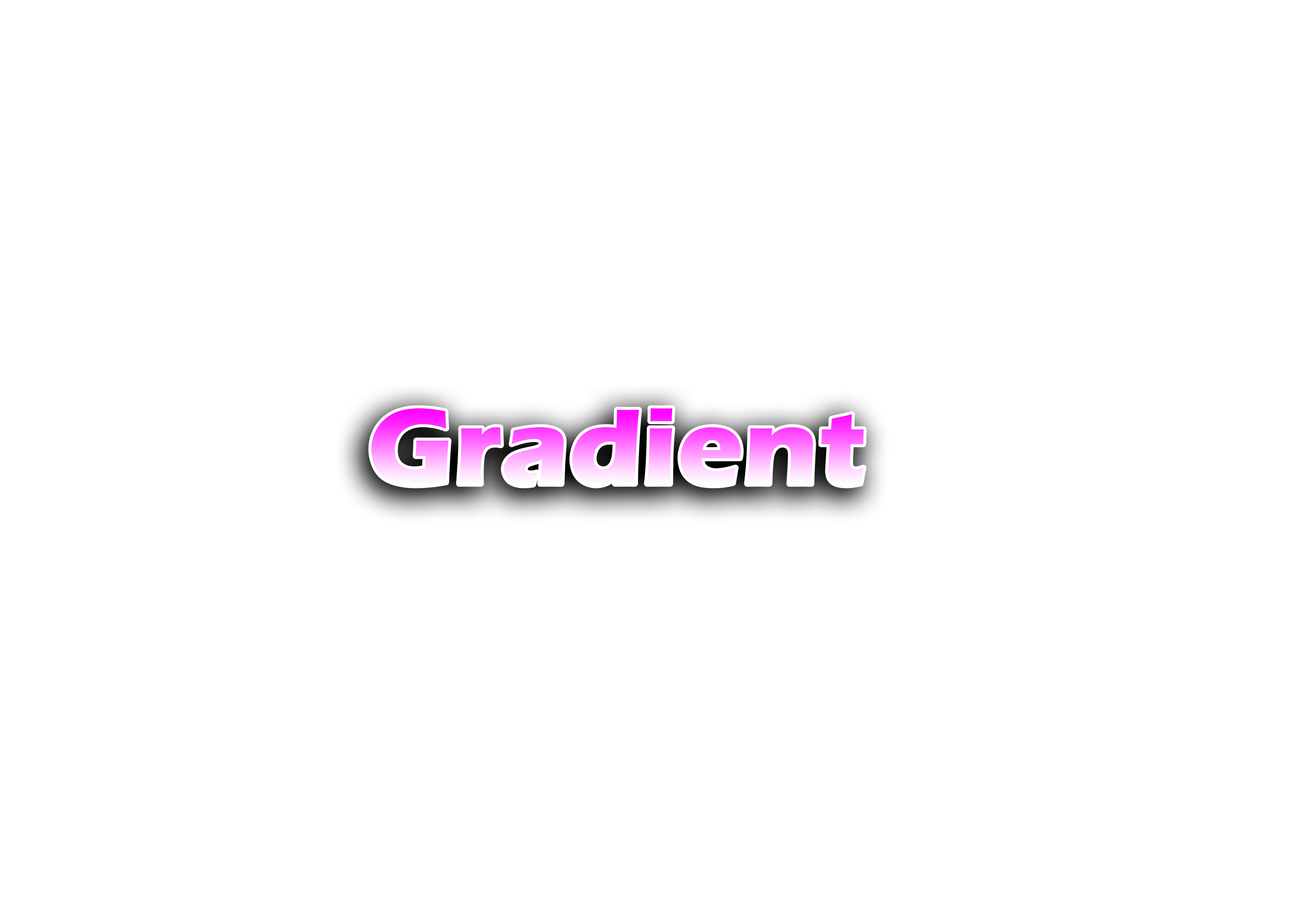
<style>
.page{position:relative;width:1299px;height:918px;background:#ffffff}
.page>*{position:absolute;margin:0}
.t1{font:111.1px "ErasITC-Bold"}
</style>
<div class="page">
<p class="t1" style="left:371px;top:408px;width:493px;height:77px">Gradient</p>
</div>
